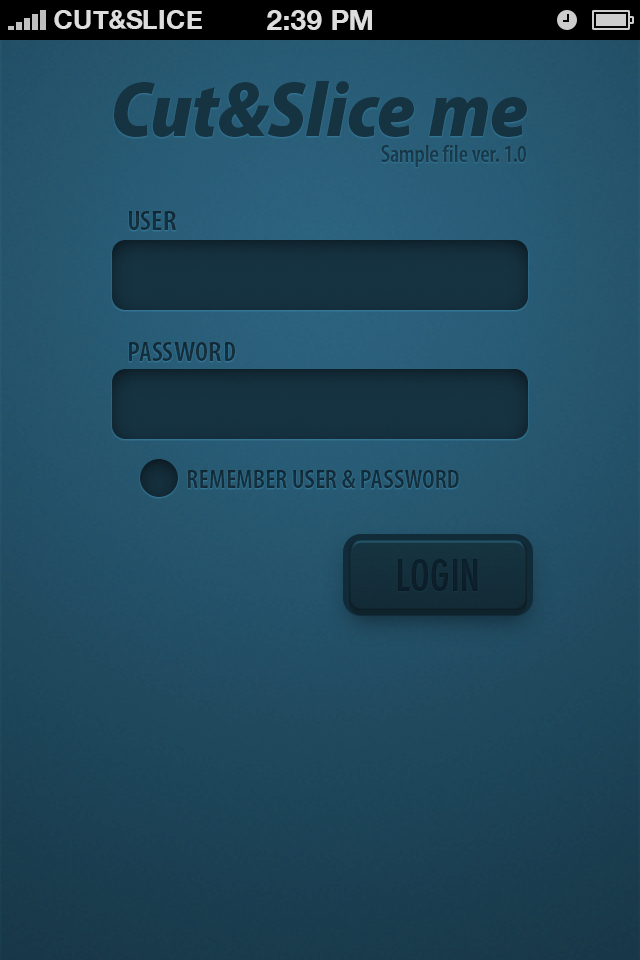
<style>
.page{position:relative;width:640px;height:960px}
.page>*{position:absolute;margin:0}
.t1{font:78px "MyriadPro-BlackSemiCnIt";color:#163342}
.t2{font:24px "MyriadPro-SemiboldCond";letter-spacing:-0.005em;color:#163342}
.t3{font:28px "MyriadPro-SemiboldCond";letter-spacing:0.01em;color:#163342;text-transform:uppercase}
.t4{font:28px "MyriadPro-SemiboldCond";letter-spacing:0.01em;color:#163342;text-transform:uppercase;scale:1.06 1}
.t5{font:28px "MyriadPro-SemiboldCond";letter-spacing:0.01em;color:#163342;text-transform:uppercase;scale:1.13 1}
.t6{font:28px "MyriadPro-SemiboldCond";letter-spacing:0.01em;color:#163342;text-transform:uppercase;scale:1.15 1}
.t7{font:28px "MyriadPro-SemiboldCond";letter-spacing:0.01em;color:#163342;text-transform:uppercase;scale:1.11 1}
.t8{font:26.7px "MyriadPro-SemiboldCond";letter-spacing:0.01em;color:#163342;text-transform:uppercase}
.t9{font:42.7px "DINNeuzeitGroteskStd-BdCond";letter-spacing:0.01em;color:#0c1f29;text-transform:uppercase}
</style>
<div class="page">
<p class="t1" style="left:114px;top:81px;width:413px;height:56px">Cut&amp;Slice me</p>
<p class="t2" style="left:381px;top:145px;width:145px;height:22px;opacity:0.7">Sample file ver. 1.0</p>
<p class="t3" style="left:129px;top:211px;width:48px;height:19px">us<span class="t4">e</span><span class="t5">r</span></p>
<p class="t3" style="left:129px;top:342px;width:106px;height:19px">pass<span class="t6">w</span>o<span class="t7">r</span>d</p>
<p class="t8" style="left:188px;top:470px;width:271px;height:18px">Remember User &amp; Password</p>
<p class="t9" style="left:398px;top:559px;width:80px;height:32px">LOGIN</p>
</div>
